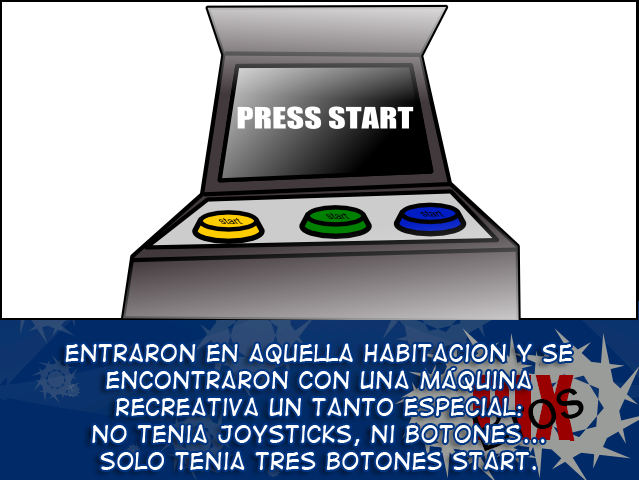
<style>
.page{position:relative;width:639px;height:480px;background:#ffffff}
.page>*{position:absolute;margin:0}
.t1{font:22.4px "DigitalStrip2";color:#ffffff}
</style>
<div class="page">
<p class="t1" style="left:65px;top:343px;width:507px;height:127px;text-align:center">Entraron en aquella habitacion y se <br>encontraron con una máquina <br>recreativa un tanto especial:<br>no tenia joysticks, ni botones... <br>Solo tenia tres botones Start.</p>
</div>
